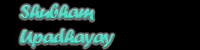
<style>
.page{position:relative;width:200px;height:50px;background:#000000}
.page>*{position:absolute;margin:0}
.t1{font:20.7px "ForteMT";letter-spacing:-0.04em;color:#4fdcc5}
</style>
<div class="page">
<p class="t1" style="left:20px;top:4px;width:94px;height:44px">Shubham<br>Upadhayay</p>
</div>
